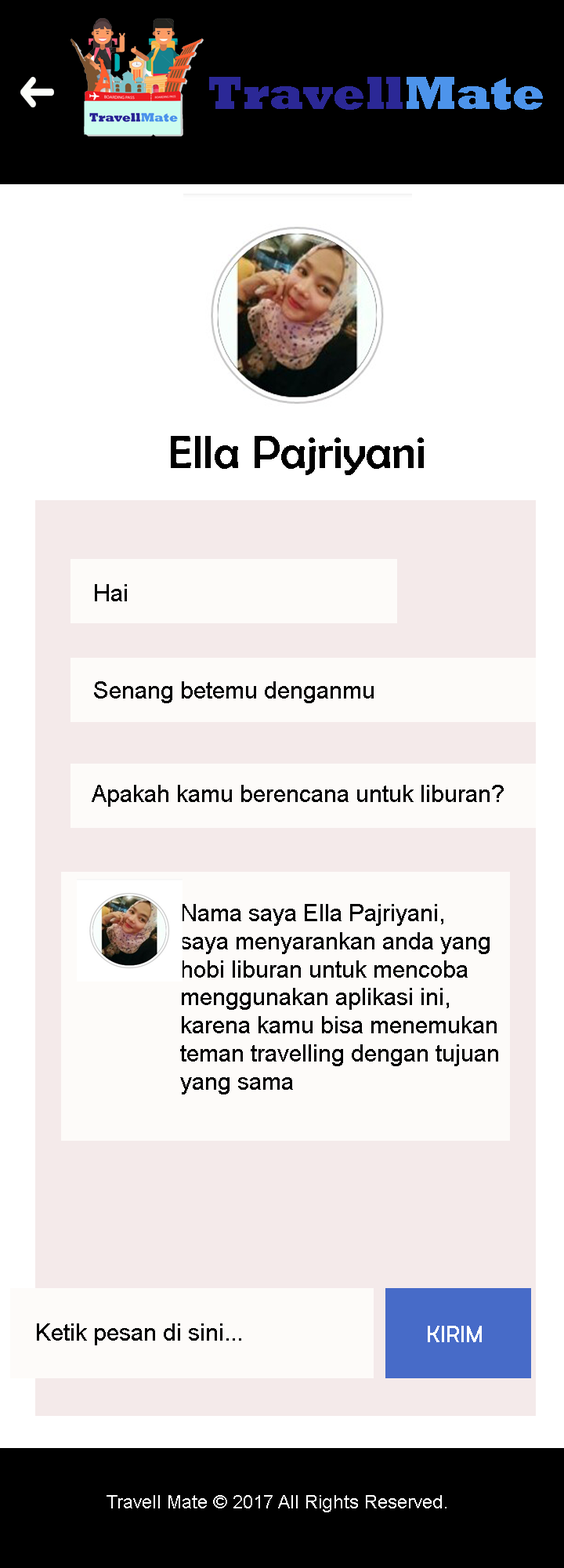
<style>
.page{position:relative;width:564px;height:1568px;background:#ffffff}
.page>*{position:absolute;margin:0}
.t1{font:47px "Rockwell-ExtraBold";color:#2b2896}
.t2{font:47px "Rockwell-ExtraBold";color:#4d94eb}
.t3{font:47.3px "BerlinSansFB-Reg";color:#000000}
.t4{font:23.5px "ArialMT";color:#000000}
.t5{font:23.5px "BerlinSansFB-Reg";color:#ffffff}
.t6{font:18.8px "ArialMT";color:#ffffff}
</style>
<div class="page">
<p class="t1" style="left:209px;top:77px;width:334px;height:33px">Travell<span class="t2">Mate</span></p>
<p class="t3" style="left:171px;top:436px;width:253px;height:39px">Ella Pajriyani</p>
<p class="t4" style="left:95px;top:584px;width:32px;height:17px">Hai</p>
<p class="t4" style="left:94px;top:681px;width:280px;height:22px">Senang betemu denganmu</p>
<p class="t4" style="left:92px;top:785px;width:412px;height:22px">Apakah kamu berencana untuk liburan?</p>
<p class="t4" style="left:180px;top:904px;width:319px;height:190px">Nama saya Ella Pajriyani,<br>saya menyarankan anda yang<br>hobi liburan untuk mencoba<br>menggunakan aplikasi ini,<br>karena kamu bisa menemukan <br>teman travelling dengan tujuan<br>yang sama</p>
<p class="t4" style="left:37px;top:1323px;width:204px;height:22px">Ketik pesan di sini...</p>
<p class="t5" style="left:428px;top:1326px;width:54px;height:16px">KIRIM</p>
<p class="t6" style="left:107px;top:1495px;width:340px;height:17px">Travell Mate © 2017 All Rights Reserved.</p>
</div>
